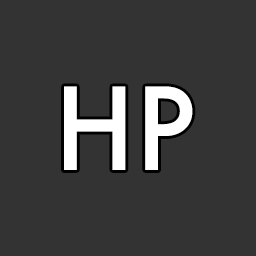
<style>
.page{position:relative;width:256px;height:256px;background:#333333}
.page>*{position:absolute;margin:0}
.t1{font:125px "FuturaPT-Medium";color:#ffffff}
</style>
<div class="page">
<p class="t1" style="left:64px;top:86px;width:129px;height:84px">HP</p>
</div>
